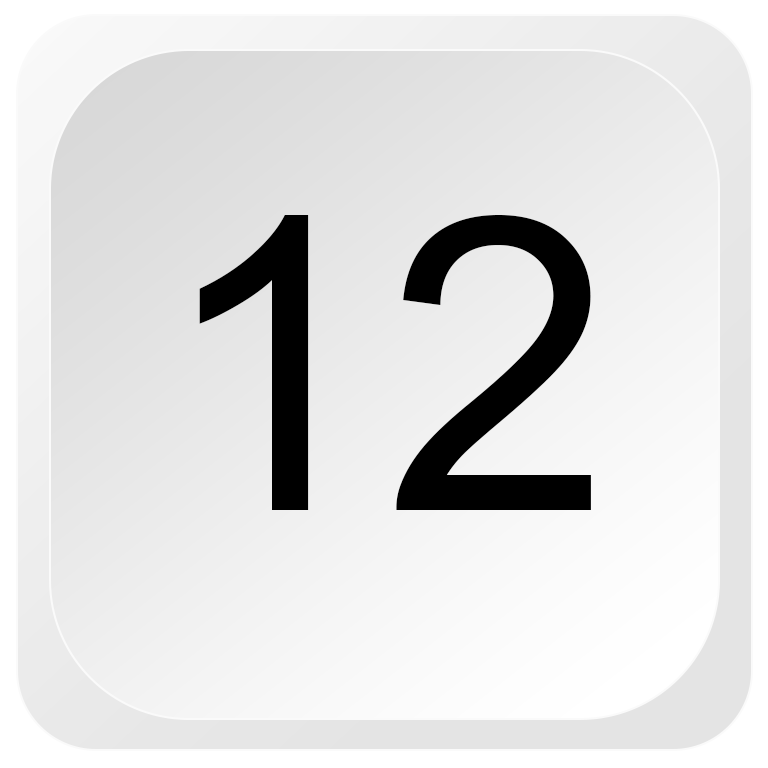
<style>
.page{position:relative;width:768px;height:768px}
.page>*{position:absolute;margin:0}
.t1{font:411px "ArialMT";color:#000000}
</style>
<div class="page">
<p class="t1" style="left:199px;top:215px;width:392px;height:295px">12</p>
</div>
